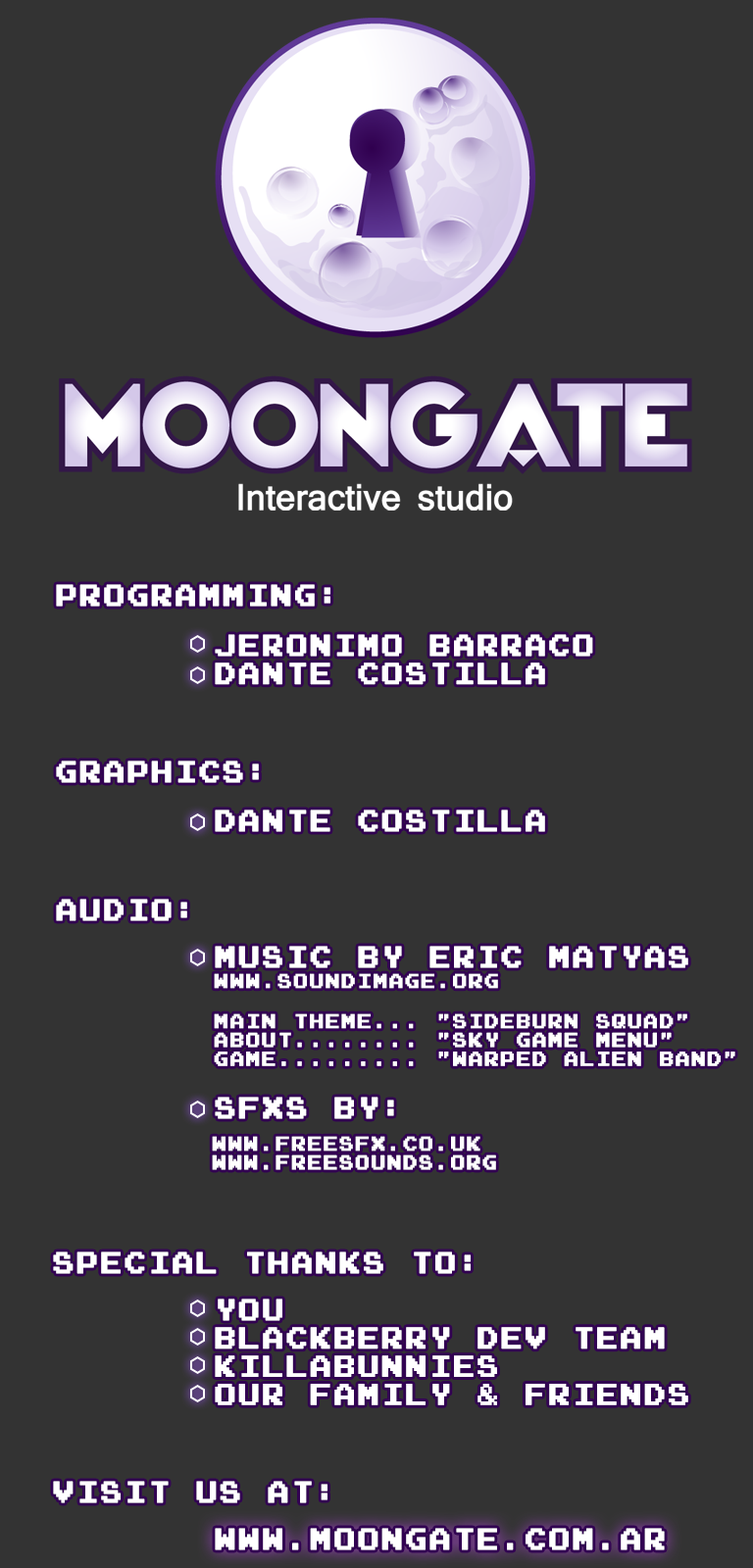
<style>
.page{position:relative;width:753px;height:1568px;background:#333333}
.page>*{position:absolute;margin:0}
.t1{font:23.5px "Emulogic";letter-spacing:0.1em;color:#ffffff;text-transform:uppercase;font-weight:bold;scale:0.9 1}
.t2{font:15.7px "Emulogic";letter-spacing:0.1em;color:#ffffff;text-transform:uppercase;font-weight:bold;scale:0.9 1}
</style>
<div class="page">
<p class="t1" style="left:56px;top:584px;width:274px;height:23px">programming:</p>
<p class="t1" style="left:215px;top:634px;width:378px;height:51px">JERONIMO BARRACO<br>dante costilla</p>
<p class="t1" style="left:56px;top:760px;width:203px;height:23px">GRAPHICS:</p>
<p class="t1" style="left:215px;top:809px;width:330px;height:23px">dante costilla</p>
<p class="t1" style="left:56px;top:899px;width:131px;height:22px">audio:</p>
<p class="t1" style="left:215px;top:946px;width:473px;height:22px">music by eric matyas</p>
<p class="t2" style="left:214px;top:973px;width:284px;height:16px">www.soundimage.org</p>
<p class="t2" style="left:214px;top:1013px;width:521px;height:53px">Main theme... "Sideburn Squad"<br>About........ "sKY gAME mENU"<br>GAME......... "warped alien band"</p>
<p class="t1" style="left:215px;top:1097px;width:179px;height:22px">SFXS BY:</p>
<p class="t2" style="left:212px;top:1136px;width:284px;height:34px">WWW.FREESFX.CO.UK<br>WWW.FREESOUNDS.ORG</p>
<p class="t1" style="left:53px;top:1251px;width:417px;height:23px">SPECIAL THANKS TO:</p>
<p class="t1" style="left:215px;top:1298px;width:473px;height:107px">you<br>blackberry dev team<br>killabunnies<br>our family &amp; friends</p>
<p class="t1" style="left:53px;top:1481px;width:274px;height:22px">visit us at:</p>
<p class="t1" style="left:215px;top:1528px;width:449px;height:22px">www.moongate.com.ar</p>
</div>
